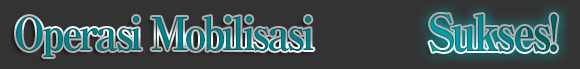
<style>
.page{position:relative;width:580px;height:69px;background:#333333}
.page>*{position:absolute;margin:0}
.t1{font:45px "RyuminPro-ExBold";letter-spacing:-0.08em;color:#007a81;scale:0.9 1}
.t2{font:50px "RyuminPro-ExBold";letter-spacing:-0.08em;scale:0.9 1}
</style>
<div class="page">
<p class="t1" style="left:16px;top:16px;width:298px;height:41px">Operasi Mobilisasi</p>
<p class="t2" style="left:429px;top:14px;width:129px;height:38px">Sukses!</p>
</div>
